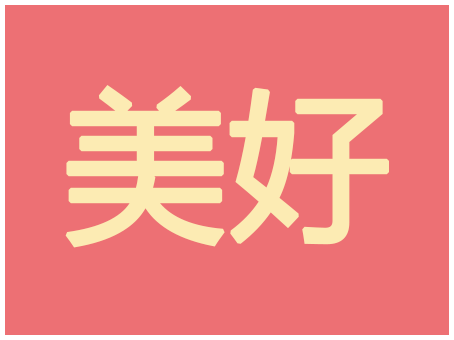
<style>
.page{position:relative;width:454px;height:340px;background:#ed7074}
.page>*{position:absolute;margin:0}
.t1{font:160px "MicrosoftYaHei";color:#fcebb3;font-weight:bold}
</style>
<div class="page">
<p class="t1" style="left:65px;top:85px;width:324px;height:163px">美好</p>
</div>
